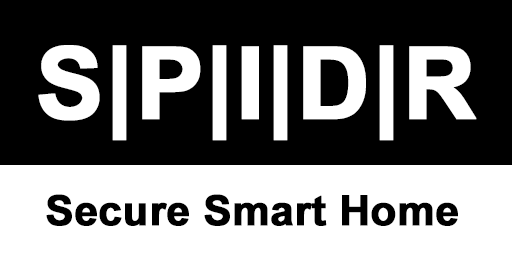
<style>
.page{position:relative;width:512px;height:256px;background:#000000}
.page>*{position:absolute;margin:0}
.t1{font:100px "Arial-BoldMT";color:#ffffff;font-weight:bold}
.t2{font:41.7px "Arial-BoldMT";color:#000000;font-weight:bold}
</style>
<div class="page">
<p class="t1" style="left:38px;top:45px;width:439px;height:96px">S|P|I|D|R</p>
<p class="t2" style="left:46px;top:194px;width:412px;height:32px">Secure Smart Home</p>
</div>
